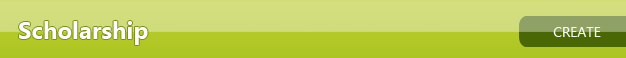
<style>
.page{position:relative;width:626px;height:58px}
.page>*{position:absolute;margin:0}
.t1{font:24px "SegoeUI-Bold";color:#fefefe}
.t2{font:14px "SegoeUI";color:#f6f7f1}
</style>
<div class="page">
<p class="t1" style="left:19px;top:21px;width:129px;height:24px">Scholarship</p>
<p class="t2" style="left:553px;top:27px;width:48px;height:10px">CREATE</p>
</div>
